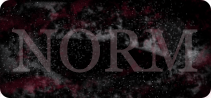
<style>
.page{position:relative;width:211px;height:98px}
.page>*{position:absolute;margin:0}
.t1{font:60px "Georgia";color:#483a3e}
</style>
<div class="page">
<p class="t1" style="left:12px;top:28px;width:186px;height:45px">NORM</p>
</div>
